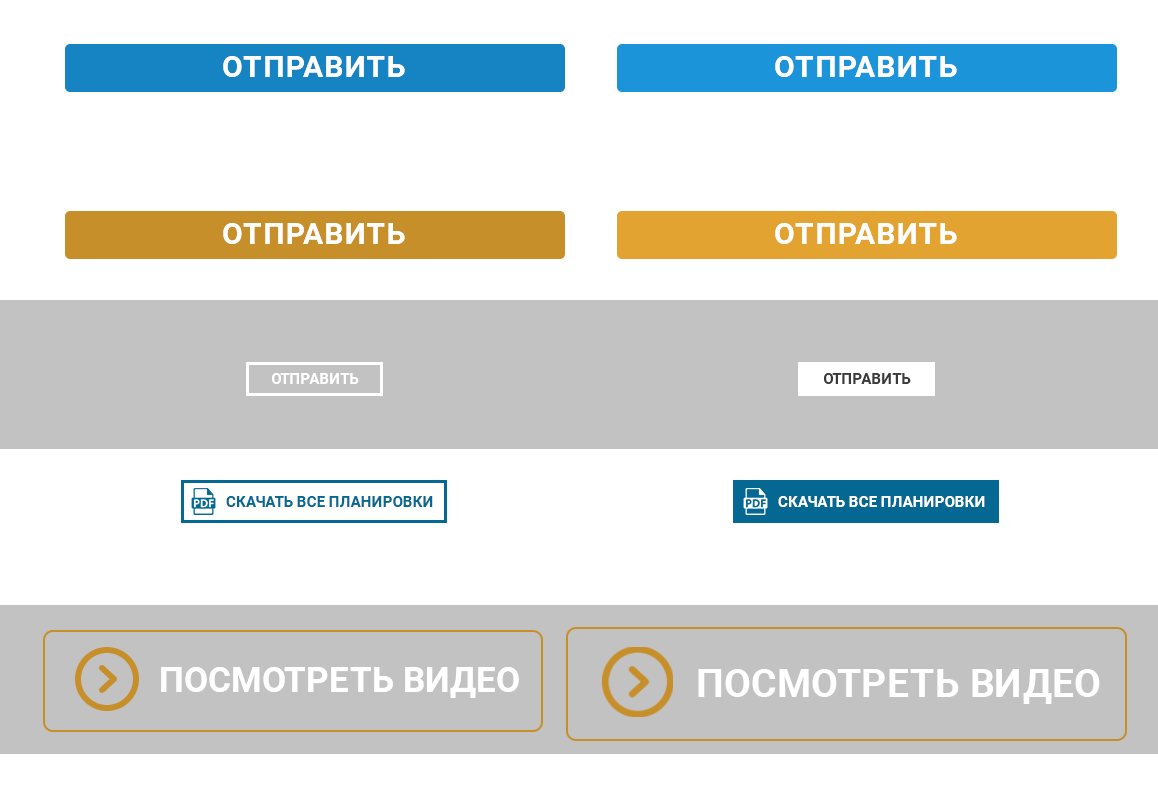
<style>
.page{position:relative;width:1158px;height:806px;background:#ffffff}
.page>*{position:absolute;margin:0}
.t1{font:30px "Roboto-Bold";letter-spacing:0.04em;color:#ffffff;text-transform:uppercase}
.t2{font:15px "Roboto-Bold";color:#ffffff}
.t3{font:15px "Roboto-Bold";color:#3a3a3a}
.t4{font:15px "Roboto-Bold";color:#056892;text-transform:uppercase}
.t5{font:15px "Roboto-Bold";color:#ffffff;text-transform:uppercase}
.t6{font:35px "Roboto-Bold";color:#ffffff;text-transform:uppercase}
.t7{font:39.1px "Roboto-Bold";color:#ffffff;text-transform:uppercase}
</style>
<div class="page">
<p class="t1" style="left:223px;top:56px;width:182px;height:21px">Отправить</p>
<p class="t1" style="left:775px;top:56px;width:182px;height:21px">Отправить</p>
<p class="t1" style="left:223px;top:223px;width:182px;height:21px">Отправить</p>
<p class="t1" style="left:775px;top:223px;width:182px;height:21px">Отправить</p>
<p class="t2" style="left:272px;top:373px;width:87px;height:11px">ОТПРАВИТЬ</p>
<p class="t3" style="left:824px;top:373px;width:87px;height:11px">ОТПРАВИТЬ</p>
<p class="t4" style="left:226px;top:496px;width:207px;height:11px">Скачать все планировки</p>
<p class="t5" style="left:778px;top:496px;width:207px;height:11px">Скачать все планировки</p>
<p class="t6" style="left:161px;top:667px;width:358px;height:31px">Посмотреть видео</p>
<p class="t7" style="left:698px;top:669px;width:402px;height:35px">Посмотреть видео</p>
</div>
